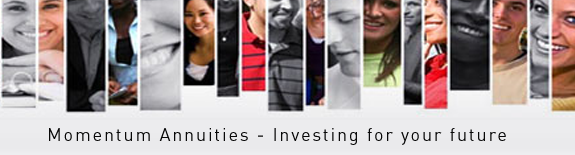
<style>
.page{position:relative;width:575px;height:155px}
.page>*{position:absolute;margin:0}
.t1{font:18px "DINOT";letter-spacing:0.1em;color:#080808}
</style>
<div class="page">
<p class="t1" style="left:49px;top:128px;width:457px;height:17px">Momentum Annuities - Investing for your future</p>
</div>
